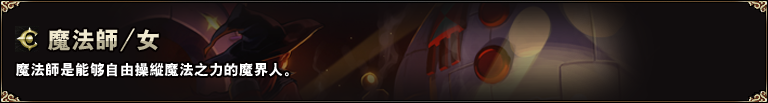
<style>
.page{position:relative;width:768px;height:103px;background:#110d0e}
.page>*{position:absolute;margin:0}
.t1{font:24px "HYb9gf"}
.t2{font:14.9px "HYb9gf";color:#ffffff}
</style>
<div class="page">
<p class="t1" style="left:48px;top:28px;width:111px;height:24px">魔法师/女</p>
<p class="t2" style="left:16px;top:62px;width:273px;height:15px">魔法师是能够自由操纵魔法之力的魔界人。</p>
</div>
